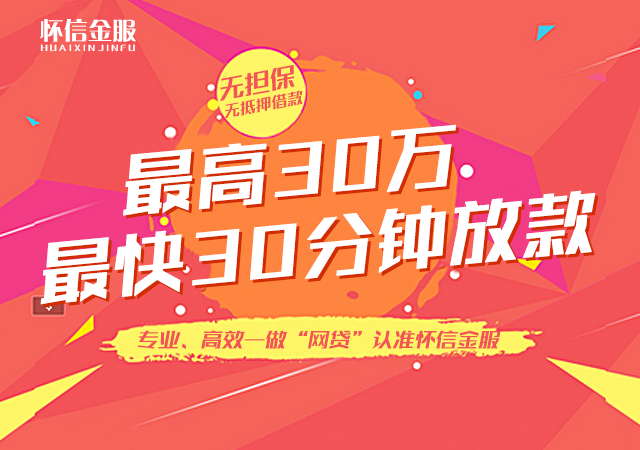
<style>
.page{position:relative;width:640px;height:450px;background:#f6635b}
.page>*{position:absolute;margin:0}
.t1{font:24.3px "FZCQJW--GB1-0";color:#feffff}
.t2{font:9.5px "FZCQJW--GB1-0";letter-spacing:0.27em;color:#feffff;text-transform:uppercase}
.t3{font:26px "BigruixianBoldkGBV1.0";color:#f35458;font-style:italic}
.t4{font:16px/105.5px "BigruixianBoldkGBV1.0";color:#f35458;font-style:italic}
.t5{font:72px "BigruixianBoldkGBV1.0";color:#ffffff;font-weight:bold;font-style:italic}
.t6{font:72px "BigruixianBoldkGBV1.0";font-weight:bold;font-style:italic}
.t7{font:72.3px "BigruixianBoldkGBV1.0";color:#ffffff;font-weight:bold;font-style:italic}
.t8{font:21px "BigruixianBoldkGBV1.0";color:#f35458;font-style:italic}
</style>
<div class="page">
<p class="t1" style="left:40px;top:19px;width:96px;height:23px">怀信金服</p>
<p class="t2" style="left:40px;top:44px;width:95px;height:8px">huaixinjinfu</p>
<p class="t3" style="left:219px;top:65px;width:76px;height:36px">无担保</p>
<p class="t4" style="left:224px;top:90px;width:79px;height:29px">无抵押借款</p>
<p class="t5" style="left:123px;top:124px;width:333px;height:92px">最高30万</p>
<p class="t6" style="left:126px;top:127px;width:333px;height:92px">最高30万</p>
<p class="t7" style="left:40px;top:190px;width:556px;height:115px">最快30分钟放款</p>
<p class="t8" style="left:137px;top:330px;width:364px;height:19px">专业、高效—做“网贷”认准怀信金服</p>
</div>
